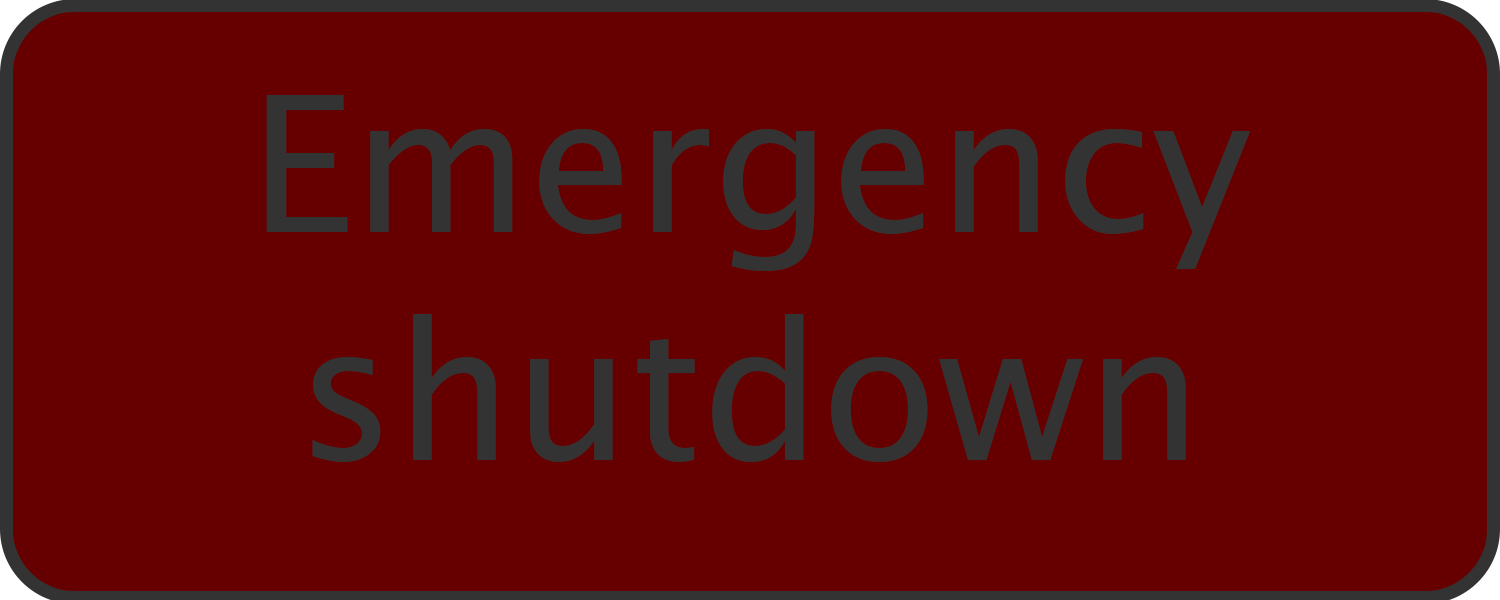
<style>
.page{position:relative;width:1500px;height:600px;background:#660000}
.page>*{position:absolute;margin:0}
.t1{font:190px "LucidaSansUnicode";color:#333333}
</style>
<div class="page">
<p class="t1" style="left:266px;top:95px;width:985px;height:367px;text-align:center">Emergency shutdown</p>
</div>
